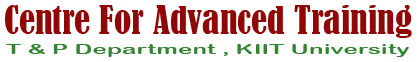
<style>
.page{position:relative;width:418px;height:62px;background:#ffffff}
.page>*{position:absolute;margin:0}
.t1{font:36px "BernardMT-Condensed";color:#8f0707}
.t2{font:14px "ArialRoundedMTBold";color:#348434;scale:1.74 1}
</style>
<div class="page">
<p class="t1" style="left:5px;top:5px;width:407px;height:33px">Centre For Advanced Training</p>
<p class="t2" style="left:6px;top:44px;width:403px;height:13px">T &amp; P Department , KIIT University</p>
</div>
